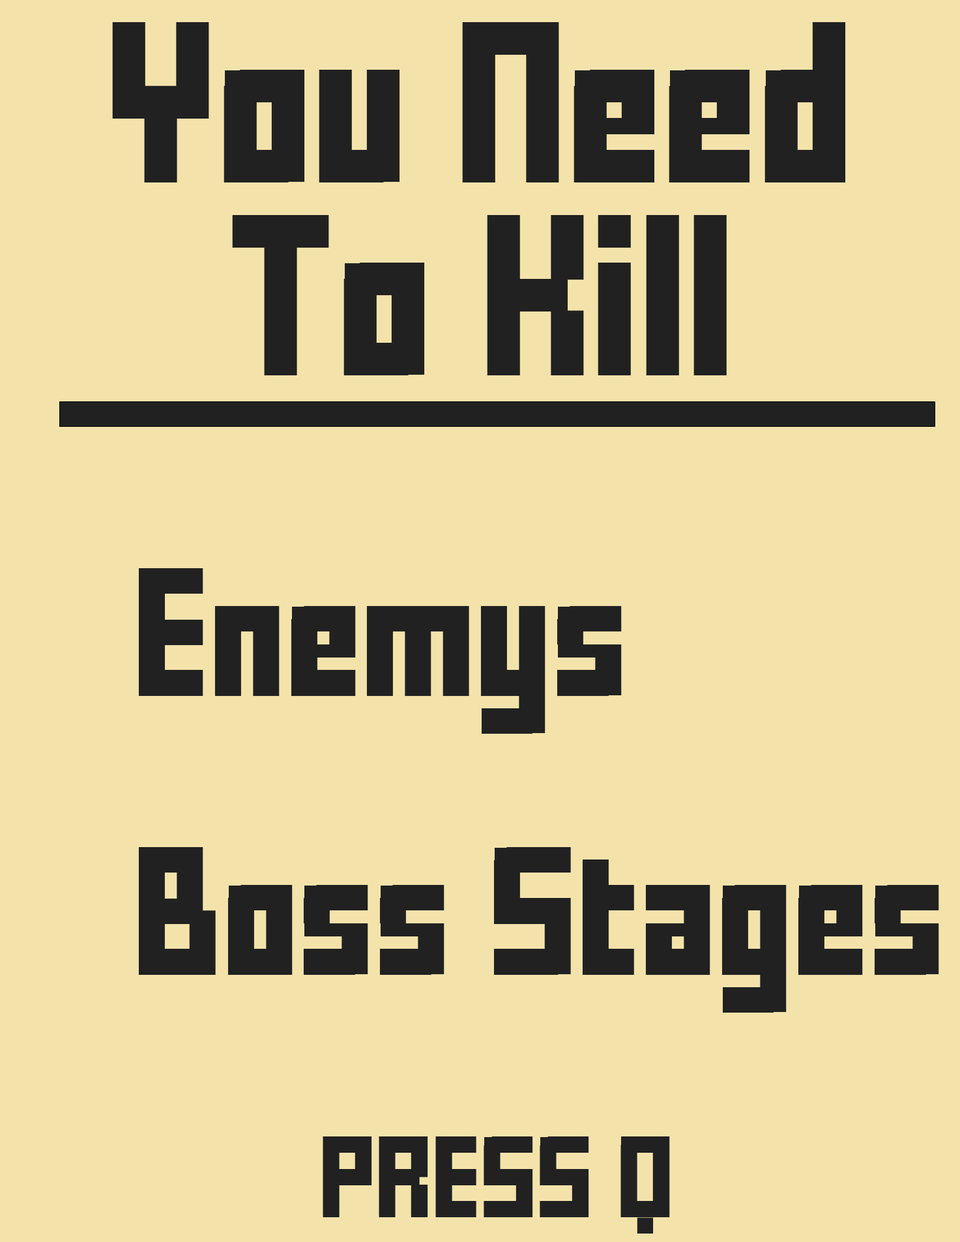
<style>
.page{position:relative;width:960px;height:1242px;background:#f3e3ab}
.page>*{position:absolute;margin:0}
.t1{font:127.2px "FFFForward";color:#212121}
.t2{font:101.3px "FFFForward";color:#212121}
.t3{font:64.3px "FFFForward";color:#212121}
</style>
<div class="page">
<p class="t1" style="left:112px;top:22px;width:734px;height:160px">You Need</p>
<p class="t1" style="left:232px;top:215px;width:495px;height:160px">To Kill</p>
<p class="t2" style="left:138px;top:568px;width:484px;height:166px">Enemys</p>
<p class="t2" style="left:138px;top:847px;width:801px;height:166px">Boss Stages</p>
<p class="t3" style="left:323px;top:1137px;width:347px;height:97px">PRESS Q</p>
</div>
